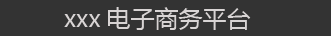
<style>
.page{position:relative;width:331px;height:36px;background:#333333}
.page>*{position:absolute;margin:0}
.t1{font:24px "MicrosoftYaHei";color:#d8d4d4}
</style>
<div class="page">
<p class="t1" style="left:64px;top:7px;width:187px;height:23px">xxx电子商务平台</p>
</div>
